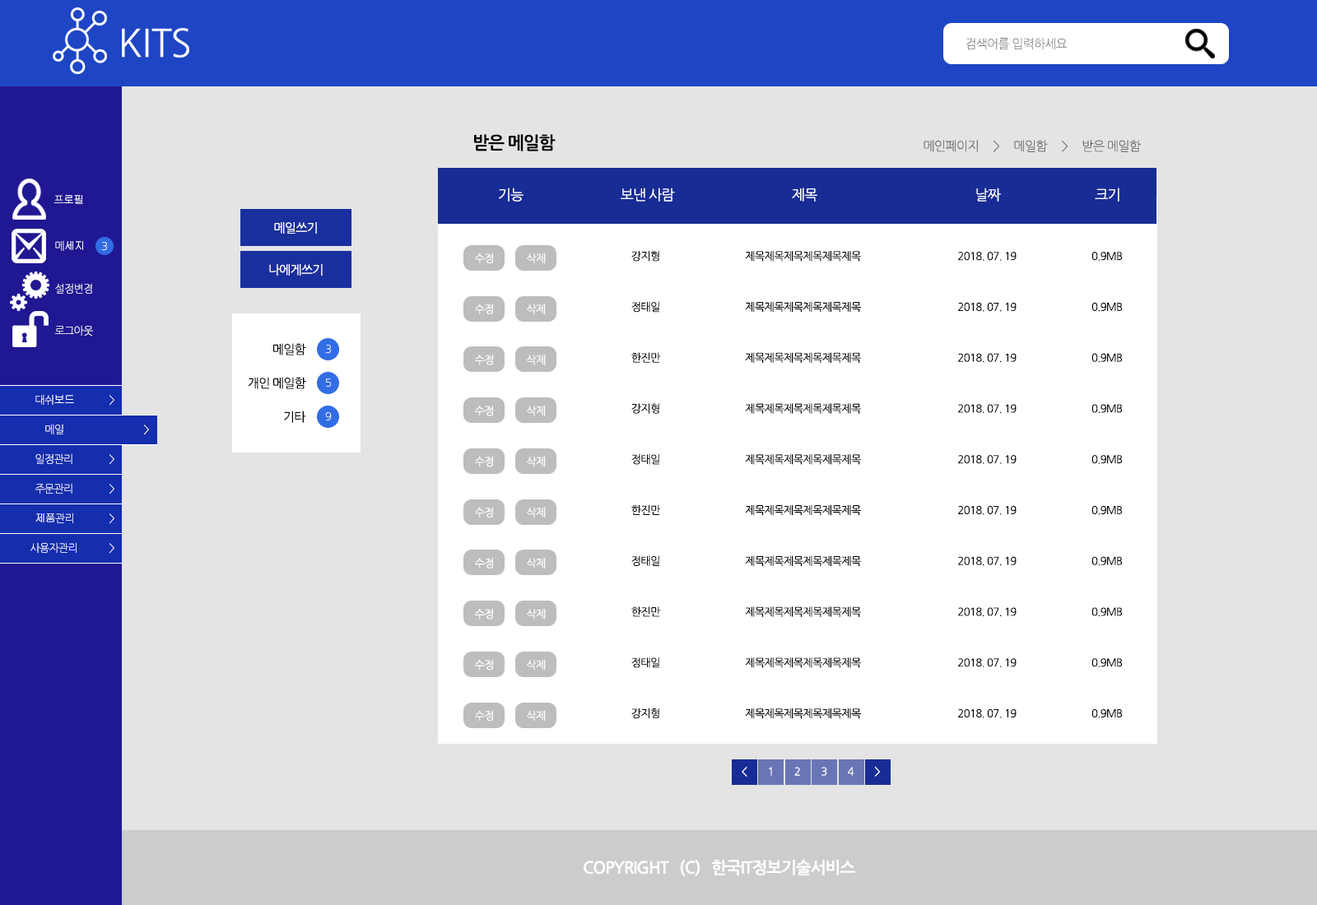
<style>
.page{position:relative;width:1317px;height:905px;background:#e4e4e4}
.page>*{position:absolute;margin:0}
.t1{font:12.3px "NanumGothicLight";letter-spacing:-0.05em;color:#737373}
.t2{font:17.5px "NanumGothicBold";letter-spacing:-0.05em;color:#000000}
.t3{font:12.5px "NanumGothicLight";letter-spacing:-0.05em;color:#4d4d4d}
.t4{font:10.7px "Gulim";letter-spacing:-0.05em;color:#ffffff}
.t5{font:10.7px "NanumGothicLight";letter-spacing:-0.05em;color:#ffffff}
.t6{font:14.2px "NanumGothic";letter-spacing:-0.05em;color:#ffffff}
.t7{font:12.3px "NanumGothic";letter-spacing:-0.05em;color:#ffffff}
.t8{font:10.7px "NanumGothicLight";letter-spacing:-0.05em}
.t9{font:10.8px "NanumGothic";letter-spacing:-0.05em;color:#ffffff}
.t10{font:10.8px "NanumGothic";letter-spacing:-0.05em;color:#000000}
.t11{font:12.3px "NanumGothic";letter-spacing:-0.05em;color:#000000}
.t12{font:16.5px "NanumGothicBold";letter-spacing:-0.05em;color:#ffffff}
</style>
<div class="page">
<p class="t1" style="left:966px;top:38px;width:102px;height:12px">검색어를 입력하세요</p>
<p class="t2" style="left:474px;top:134px;width:82px;height:17px">받은 메일함</p>
<p class="t3" style="left:924px;top:140px;width:217px;height:12px">메인페이지     &gt;     메일함     &gt;     받은 메일함</p>
<p class="t4" style="left:54px;top:195px;width:29px;height:9px"><span class="t5">프</span>로필</p>
<p class="t6" style="left:499px;top:188px;width:25px;height:14px">기능</p>
<p class="t6" style="left:621px;top:188px;width:54px;height:14px">보낸 사람</p>
<p class="t6" style="left:792px;top:188px;width:25px;height:14px">제목</p>
<p class="t6" style="left:976px;top:188px;width:25px;height:14px">날짜</p>
<p class="t6" style="left:1095px;top:188px;width:24px;height:14px">크기</p>
<p class="t7" style="left:274px;top:222px;width:43px;height:12px">메일쓰기</p>
<p class="t4" style="left:55px;top:240px;width:28px;height:11px"><span class="t5">메</span>세지</p>
<p class="t8" style="left:101px;top:242px;width:6px;height:9px">3</p>
<p class="t9" style="left:475px;top:253px;width:18px;height:11px">수정</p>
<p class="t9" style="left:527px;top:253px;width:19px;height:11px">삭제</p>
<p class="t10" style="left:631px;top:251px;width:28px;height:11px">강지형</p>
<p class="t10" style="left:745px;top:251px;width:116px;height:11px">제목제목제목제목제목제목</p>
<p class="t10" style="left:958px;top:252px;width:59px;height:9px">2018. 07. 19</p>
<p class="t10" style="left:1091px;top:252px;width:32px;height:9px">0.9MB</p>
<p class="t7" style="left:269px;top:264px;width:54px;height:12px">나에게쓰기</p>
<p class="t5" style="left:55px;top:283px;width:37px;height:11px">설정변경</p>
<p class="t9" style="left:475px;top:304px;width:18px;height:10px">수정</p>
<p class="t9" style="left:527px;top:304px;width:19px;height:10px">삭제</p>
<p class="t10" style="left:631px;top:301px;width:28px;height:12px">정태일</p>
<p class="t10" style="left:745px;top:301px;width:116px;height:12px">제목제목제목제목제목제목</p>
<p class="t10" style="left:958px;top:302px;width:59px;height:10px">2018. 07. 19</p>
<p class="t10" style="left:1091px;top:302px;width:32px;height:10px">0.9MB</p>
<p class="t5" style="left:54px;top:325px;width:40px;height:11px">로그아웃</p>
<p class="t11" style="left:273px;top:343px;width:33px;height:13px">메일함</p>
<p class="t8" style="left:325px;top:345px;width:6px;height:9px">3</p>
<p class="t10" style="left:631px;top:352px;width:30px;height:11px">한진만</p>
<p class="t10" style="left:745px;top:352px;width:116px;height:11px">제목제목제목제목제목제목</p>
<p class="t10" style="left:958px;top:353px;width:59px;height:10px">2018. 07. 19</p>
<p class="t10" style="left:1091px;top:353px;width:32px;height:10px">0.9MB</p>
<p class="t9" style="left:475px;top:355px;width:18px;height:10px">수정</p>
<p class="t9" style="left:527px;top:355px;width:19px;height:10px">삭제</p>
<p class="t11" style="left:248px;top:377px;width:58px;height:12px">개인 메일함</p>
<p class="t8" style="left:326px;top:379px;width:5px;height:9px">5</p>
<p class="t5" style="left:35px;top:394px;width:39px;height:11px">대쉬<span class="t4">보드</span></p>
<p class="t8" style="left:109px;top:395px;width:5px;height:11px">&gt;</p>
<p class="t11" style="left:284px;top:411px;width:22px;height:12px">기타</p>
<p class="t5" style="left:325px;top:412px;width:7px;height:9px">9</p>
<p class="t9" style="left:475px;top:406px;width:18px;height:10px">수정</p>
<p class="t9" style="left:527px;top:406px;width:19px;height:10px">삭제</p>
<p class="t10" style="left:631px;top:403px;width:28px;height:11px">강지형</p>
<p class="t10" style="left:745px;top:403px;width:116px;height:11px">제목제목제목제목제목제목</p>
<p class="t10" style="left:958px;top:404px;width:59px;height:9px">2018. 07. 19</p>
<p class="t10" style="left:1091px;top:404px;width:32px;height:9px">0.9MB</p>
<p class="t8" style="left:45px;top:424px;width:18px;height:11px">메일</p>
<p class="t8" style="left:144px;top:425px;width:5px;height:10px">&gt;</p>
<p class="t5" style="left:35px;top:454px;width:37px;height:10px">일정관리</p>
<p class="t8" style="left:109px;top:454px;width:5px;height:11px">&gt;</p>
<p class="t9" style="left:475px;top:456px;width:18px;height:12px">수정</p>
<p class="t9" style="left:527px;top:456px;width:19px;height:12px">삭제</p>
<p class="t10" style="left:631px;top:454px;width:28px;height:11px">정태일</p>
<p class="t10" style="left:745px;top:454px;width:116px;height:11px">제목제목제목제목제목제목</p>
<p class="t10" style="left:958px;top:455px;width:59px;height:9px">2018. 07. 19</p>
<p class="t10" style="left:1091px;top:455px;width:32px;height:9px">0.9MB</p>
<p class="t5" style="left:35px;top:483px;width:37px;height:11px">주문관리</p>
<p class="t8" style="left:109px;top:484px;width:5px;height:11px">&gt;</p>
<p class="t9" style="left:475px;top:507px;width:18px;height:11px">수정</p>
<p class="t9" style="left:527px;top:507px;width:19px;height:11px">삭제</p>
<p class="t10" style="left:631px;top:505px;width:30px;height:10px">한진만</p>
<p class="t10" style="left:745px;top:505px;width:116px;height:11px">제목제목제목제목제목제목</p>
<p class="t10" style="left:958px;top:505px;width:59px;height:10px">2018. 07. 19</p>
<p class="t10" style="left:1091px;top:505px;width:32px;height:10px">0.9MB</p>
<p class="t4" style="left:35px;top:513px;width:38px;height:11px">제품<span class="t5">관리</span></p>
<p class="t8" style="left:109px;top:514px;width:5px;height:10px">&gt;</p>
<p class="t5" style="left:30px;top:542px;width:47px;height:11px">사용자관리</p>
<p class="t8" style="left:109px;top:543px;width:5px;height:11px">&gt;</p>
<p class="t10" style="left:631px;top:556px;width:28px;height:10px">정태일</p>
<p class="t10" style="left:745px;top:556px;width:116px;height:11px">제목제목제목제목제목제목</p>
<p class="t10" style="left:958px;top:556px;width:59px;height:10px">2018. 07. 19</p>
<p class="t10" style="left:1091px;top:556px;width:32px;height:10px">0.9MB</p>
<p class="t9" style="left:475px;top:558px;width:18px;height:11px">수정</p>
<p class="t9" style="left:527px;top:558px;width:19px;height:11px">삭제</p>
<p class="t9" style="left:475px;top:609px;width:18px;height:11px">수정</p>
<p class="t9" style="left:527px;top:609px;width:19px;height:11px">삭제</p>
<p class="t10" style="left:631px;top:607px;width:30px;height:10px">한진만</p>
<p class="t10" style="left:745px;top:607px;width:116px;height:10px">제목제목제목제목제목제목</p>
<p class="t10" style="left:958px;top:607px;width:59px;height:10px">2018. 07. 19</p>
<p class="t10" style="left:1091px;top:607px;width:32px;height:10px">0.9MB</p>
<p class="t9" style="left:475px;top:659px;width:18px;height:12px">수정</p>
<p class="t9" style="left:527px;top:659px;width:19px;height:12px">삭제</p>
<p class="t10" style="left:631px;top:658px;width:28px;height:10px">정태일</p>
<p class="t10" style="left:745px;top:658px;width:116px;height:10px">제목제목제목제목제목제목</p>
<p class="t10" style="left:958px;top:658px;width:59px;height:10px">2018. 07. 19</p>
<p class="t10" style="left:1091px;top:658px;width:32px;height:10px">0.9MB</p>
<p class="t9" style="left:475px;top:710px;width:18px;height:11px">수정</p>
<p class="t9" style="left:527px;top:710px;width:19px;height:11px">삭제</p>
<p class="t10" style="left:631px;top:709px;width:28px;height:10px">강지형</p>
<p class="t10" style="left:745px;top:709px;width:116px;height:10px">제목제목제목제목제목제목</p>
<p class="t10" style="left:958px;top:710px;width:59px;height:9px">2018. 07. 19</p>
<p class="t10" style="left:1091px;top:710px;width:32px;height:9px">0.9MB</p>
<p class="t9" style="left:742px;top:766px;width:5px;height:11px">&lt;</p>
<p class="t9" style="left:769px;top:767px;width:3px;height:9px">1</p>
<p class="t9" style="left:794px;top:767px;width:6px;height:9px">2</p>
<p class="t9" style="left:821px;top:767px;width:6px;height:9px">3</p>
<p class="t9" style="left:848px;top:767px;width:6px;height:9px">4</p>
<p class="t9" style="left:875px;top:766px;width:5px;height:11px">&gt;</p>
<p class="t12" style="left:584px;top:859px;width:271px;height:18px">COPYRIGHT   (C)   한국IT정보기술서비스</p>
</div>
